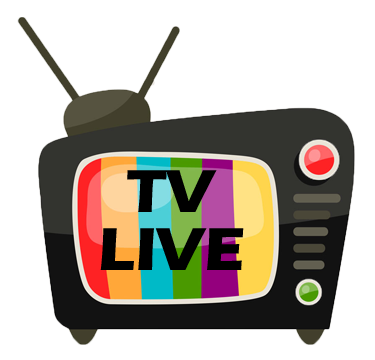
<style>
.page{position:relative;width:375px;height:360px;background:#ffffff}
.page>*{position:absolute;margin:0}
.t1{font:62.8px "ErasITC-Bold";color:#000000}
</style>
<div class="page">
<p class="t1" style="left:127px;top:170px;width:90px;height:42px">TV</p>
<p class="t1" style="left:100px;top:228px;width:144px;height:42px">LIVE</p>
</div>
